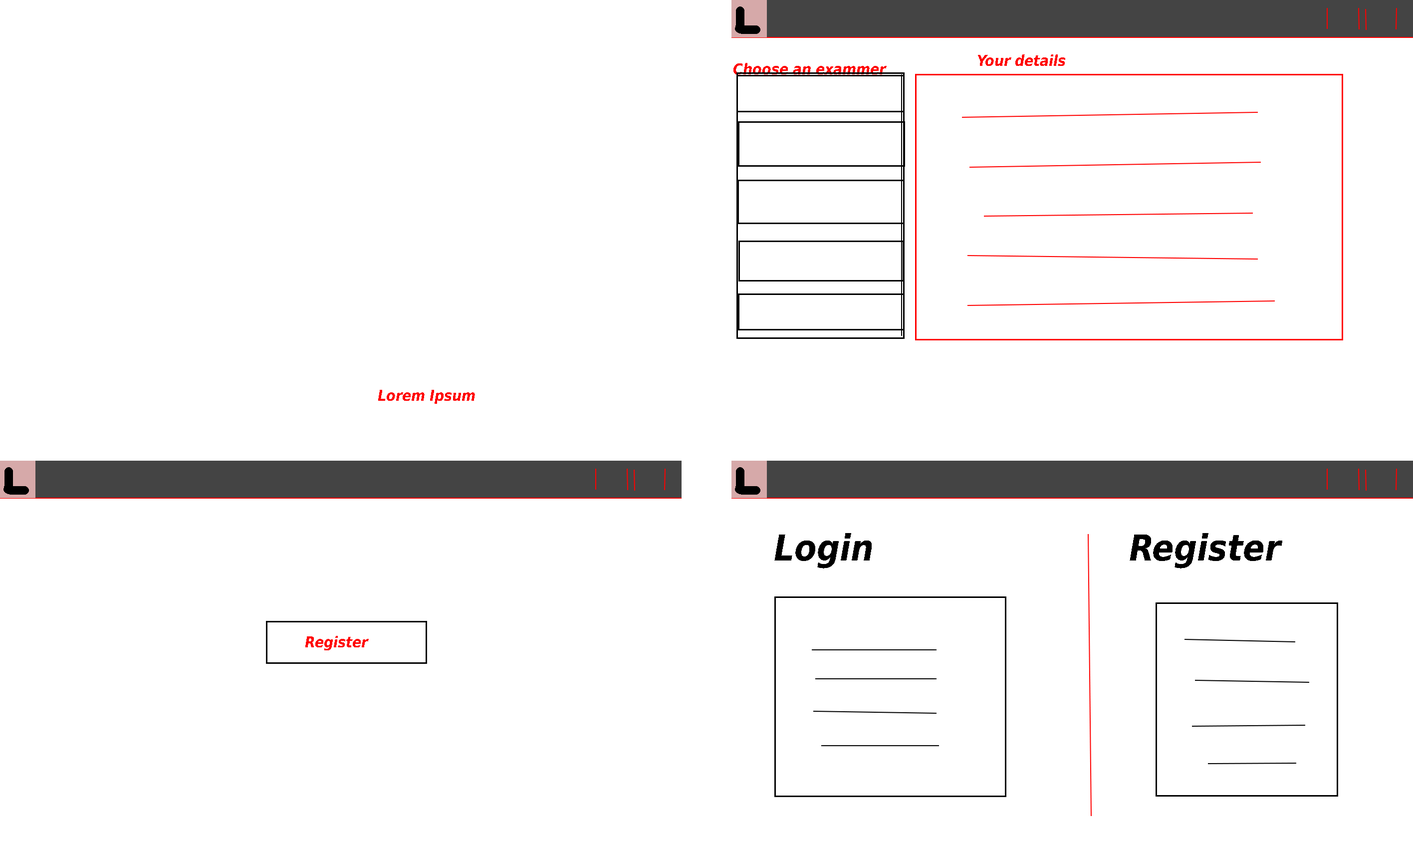
<style>
.page{position:relative;width:1413px;height:844px;background:#ffffff}
.page>*{position:absolute;margin:0}
.t1{font:15px "DejaVuSansCondensed-BoldOblique";color:#ff0000}
.t2{font:35.9px "DejaVuSansCondensed-BoldOblique";color:#000000}
</style>
<div class="page">
<p class="t1" style="left:734px;top:63px;width:153px;height:11px">Choose an exammer</p>
<p class="t1" style="left:978px;top:54px;width:87px;height:12px">Your details</p>
<p class="t1" style="left:378px;top:390px;width:97px;height:14px">Lorem Ipsum</p>
<p class="t2" style="left:774px;top:533px;width:98px;height:35px">Login</p>
<p class="t2" style="left:1130px;top:533px;width:152px;height:35px">Register</p>
<p class="t1" style="left:305px;top:636px;width:64px;height:14px">Register</p>
</div>
